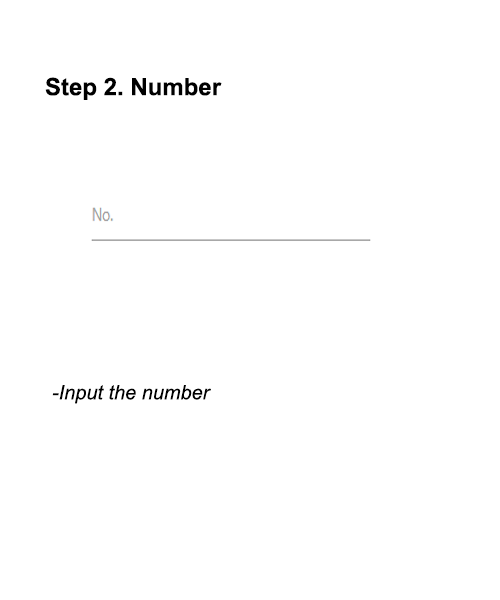
<style>
.page{position:relative;width:500px;height:600px;background:#ffffff}
.page>*{position:absolute;margin:0}
.t1{font:24px "Arial-BoldMT";color:#000000}
.t2{font:20px "Arial-ItalicMT";color:#000000}
</style>
<div class="page">
<p class="t1" style="left:45px;top:77px;width:177px;height:23px">Step 2. Number</p>
<p class="t2" style="left:52px;top:385px;width:159px;height:19px">-Input the number</p>
</div>
